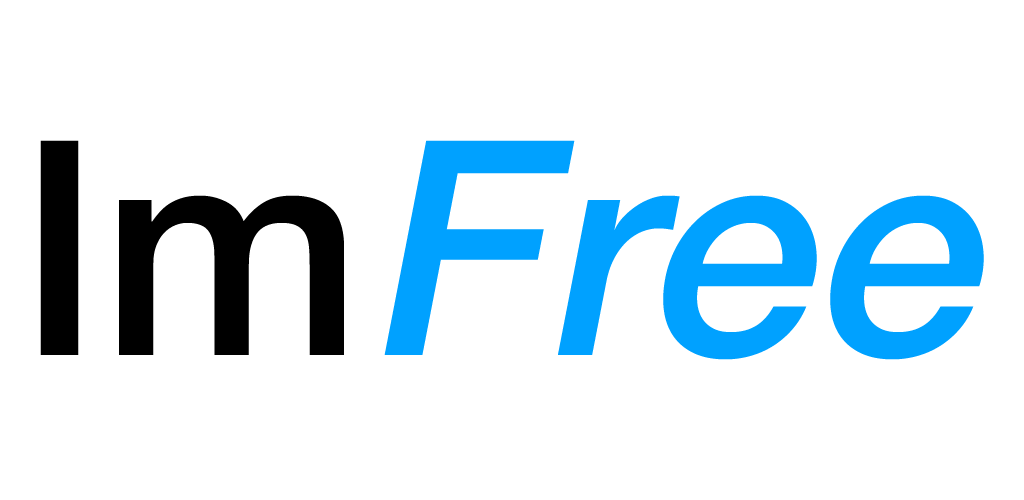
<style>
.page{position:relative;width:1024px;height:500px;background:#ffffff}
.page>*{position:absolute;margin:0}
.t1{font:300px "HelveticaNeue-Medium";color:#00a1ff;font-style:italic}
.t2{font:300px "HelveticaNeue-Medium";color:#000000}
</style>
<div class="page">
<p class="t1" style="left:40px;top:140px;width:944px;height:220px"><span class="t2">Im</span>Free</p>
</div>
